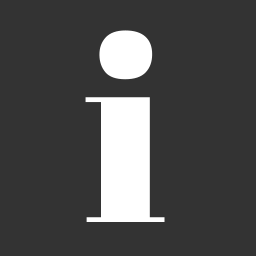
<style>
.page{position:relative;width:256px;height:256px;background:#333333}
.page>*{position:absolute;margin:0}
.t1{font:262.5px "AbrilFatface-Regular";letter-spacing:0.02em;color:#ffffff}
</style>
<div class="page">
<p class="t1" style="left:85px;top:30px;width:80px;height:192px">i</p>
</div>
